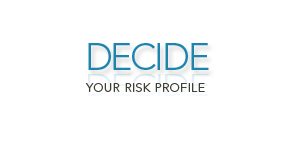
<style>
.page{position:relative;width:294px;height:141px;background:#ffffff}
.page>*{position:absolute;margin:0}
.t1{font:37.8px "Avenir-Light";letter-spacing:-0.06em;color:#1d85ad}
.t2{font:12.5px "Avenir-Light";letter-spacing:0.02em;color:#403e30}
</style>
<div class="page">
<p class="t1" style="left:88px;top:43px;width:121px;height:27px">DECIDE</p>
<p class="t2" style="left:85px;top:83px;width:120px;height:9px">YOUR RISK PROFILE</p>
</div>
